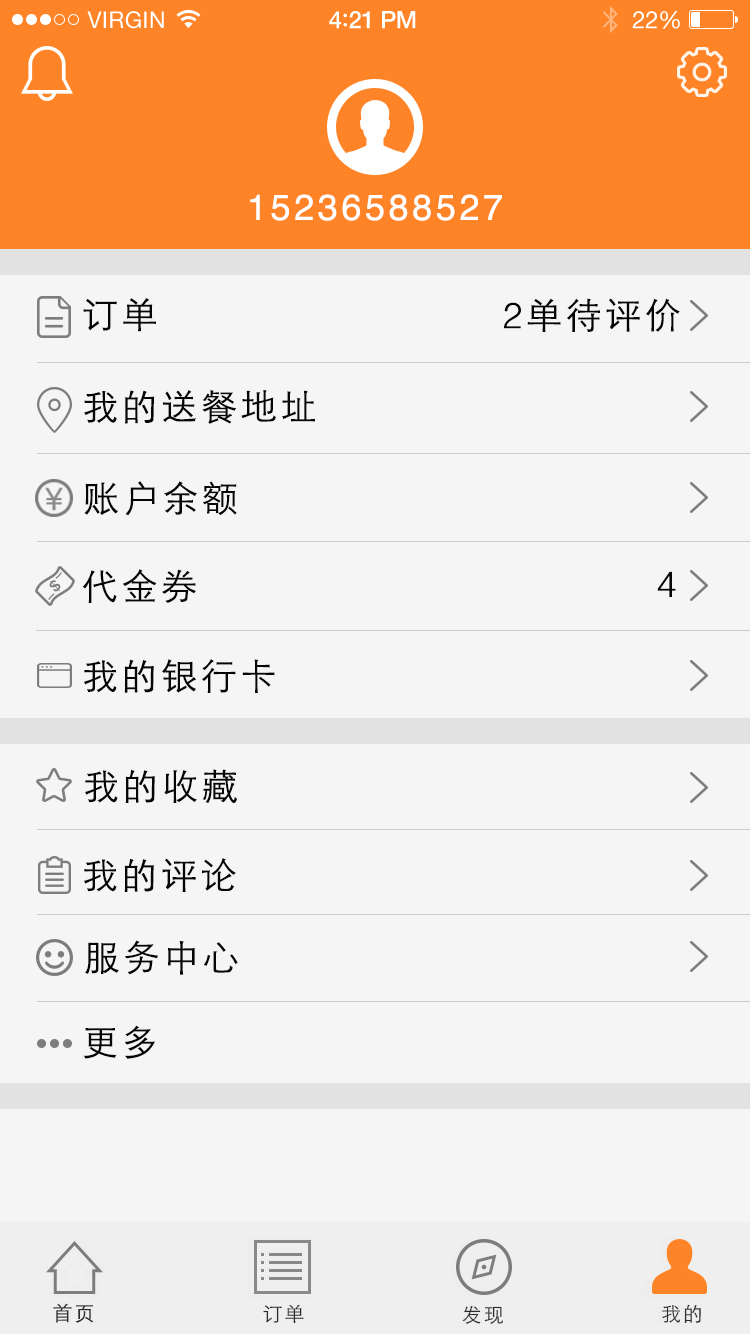
<style>
.page{position:relative;width:750px;height:1334px;background:#f6f5f5}
.page>*{position:absolute;margin:0}
.t1{font:23px "HelveticaNeue";letter-spacing:0.02em;color:#ffffff}
.t2{font:24px "HelveticaNeue-Medium";letter-spacing:-0.02em;color:#ffffff}
.t3{font:26px "Avenir-Medium";letter-spacing:-0.02em;color:#ffffff}
.t4{font:24px "HelveticaNeue";letter-spacing:-0.02em;color:#ffffff}
.t5{font:36px "Helvetica";letter-spacing:0.1em;color:#ffffff}
.t6{font:36px "STXihei";letter-spacing:0.1em;color:#060606}
.t7{font:36px "Helvetica-Light";letter-spacing:0.1em;color:#060606}
.t8{font:20px "STXihei";letter-spacing:0.1em;color:#2b2a2a}
</style>
<div class="page">
<p class="t1" style="left:87px;top:11px;width:77px;height:18px">VIRGIN</p>
<p class="t2" style="left:329px;top:11px;width:87px;height:18px">4<span class="t3">:</span>21 PM</p>
<p class="t4" style="left:632px;top:11px;width:48px;height:18px">22%</p>
<p class="t5" style="left:250px;top:194px;width:252px;height:27px">15236588527</p>
<p class="t6" style="left:83px;top:298px;width:73px;height:34px">订单</p>
<p class="t6" style="left:504px;top:298px;width:176px;height:34px"><span class="t7">2</span>单待评价</p>
<p class="t6" style="left:84px;top:390px;width:231px;height:34px">我的送餐地址</p>
<p class="t6" style="left:84px;top:481px;width:153px;height:35px">账户余额</p>
<p class="t6" style="left:82px;top:569px;width:114px;height:34px">代金券</p>
<p class="t7" style="left:657px;top:571px;width:19px;height:26px">4</p>
<p class="t6" style="left:84px;top:659px;width:191px;height:34px">我的银行卡</p>
<p class="t6" style="left:85px;top:769px;width:152px;height:34px">我的收藏</p>
<p class="t6" style="left:84px;top:858px;width:152px;height:34px">我的评论</p>
<p class="t6" style="left:85px;top:940px;width:153px;height:35px">服务中心</p>
<p class="t6" style="left:83px;top:1025px;width:72px;height:34px">更多</p>
<p class="t8" style="left:53px;top:1303px;width:40px;height:20px">首页</p>
<p class="t8" style="left:263px;top:1304px;width:41px;height:20px">订单</p>
<p class="t8" style="left:462px;top:1306px;width:41px;height:18px">发现</p>
<p class="t8" style="left:662px;top:1304px;width:39px;height:20px">我的</p>
</div>
